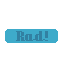
<style>
.page{position:relative;width:64px;height:64px;background:#ffffff}
.page>*{position:absolute;margin:0}
.t1{font:14px "Superscript";color:#3281a2}
</style>
<div class="page">
<p class="t1" style="left:16px;top:31px;width:32px;height:10px">Rad!</p>
</div>
